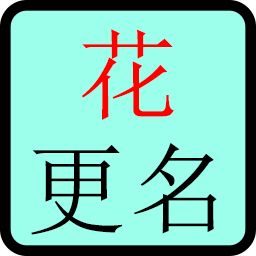
<style>
.page{position:relative;width:256px;height:256px;background:#9cffeb}
.page>*{position:absolute;margin:0}
.t1{font:100px/114.7px "NSimSun";color:#000000;font-weight:bold}
.t2{font:100px/114.7px "NSimSun";color:#ff0000;font-weight:bold}
</style>
<div class="page">
<p class="t1" style="left:31px;top:29px;width:186px;height:206px;text-align:center"><span class="t2">花<br></span>更名</p>
</div>
